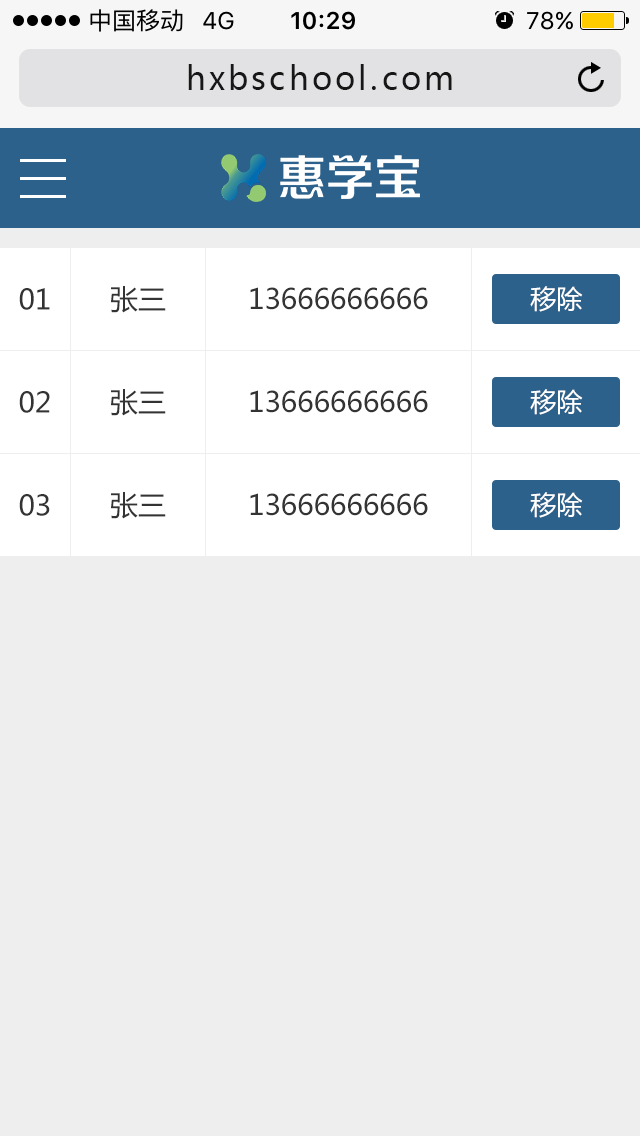
<style>
.page{position:relative;width:640px;height:1136px;background:#eeeeee}
.page>*{position:absolute;margin:0}
.t1{font:32px "MicrosoftYaHei";letter-spacing:0.1em;color:#171717}
.t2{font:28px "MicrosoftYaHei";color:#333333}
.t3{font:26px "MicrosoftYaHei";color:#ffffff}
</style>
<div class="page">
<p class="t1" style="left:188px;top:64px;width:264px;height:26px">hxbschool.com</p>
<p class="t2" style="left:19px;top:288px;width:31px;height:22px">01</p>
<p class="t2" style="left:111px;top:286px;width:55px;height:27px">张三</p>
<p class="t2" style="left:250px;top:287px;width:178px;height:23px">13666666666</p>
<p class="t3" style="left:530px;top:286px;width:53px;height:26px">移除</p>
<p class="t2" style="left:111px;top:389px;width:55px;height:27px">张三</p>
<p class="t2" style="left:250px;top:390px;width:178px;height:23px">13666666666</p>
<p class="t3" style="left:530px;top:389px;width:53px;height:26px">移除</p>
<p class="t2" style="left:19px;top:391px;width:31px;height:22px">02</p>
<p class="t2" style="left:19px;top:494px;width:31px;height:22px">03</p>
<p class="t2" style="left:111px;top:492px;width:55px;height:27px">张三</p>
<p class="t2" style="left:250px;top:493px;width:178px;height:23px">13666666666</p>
<p class="t3" style="left:530px;top:492px;width:53px;height:26px">移除</p>
</div>
